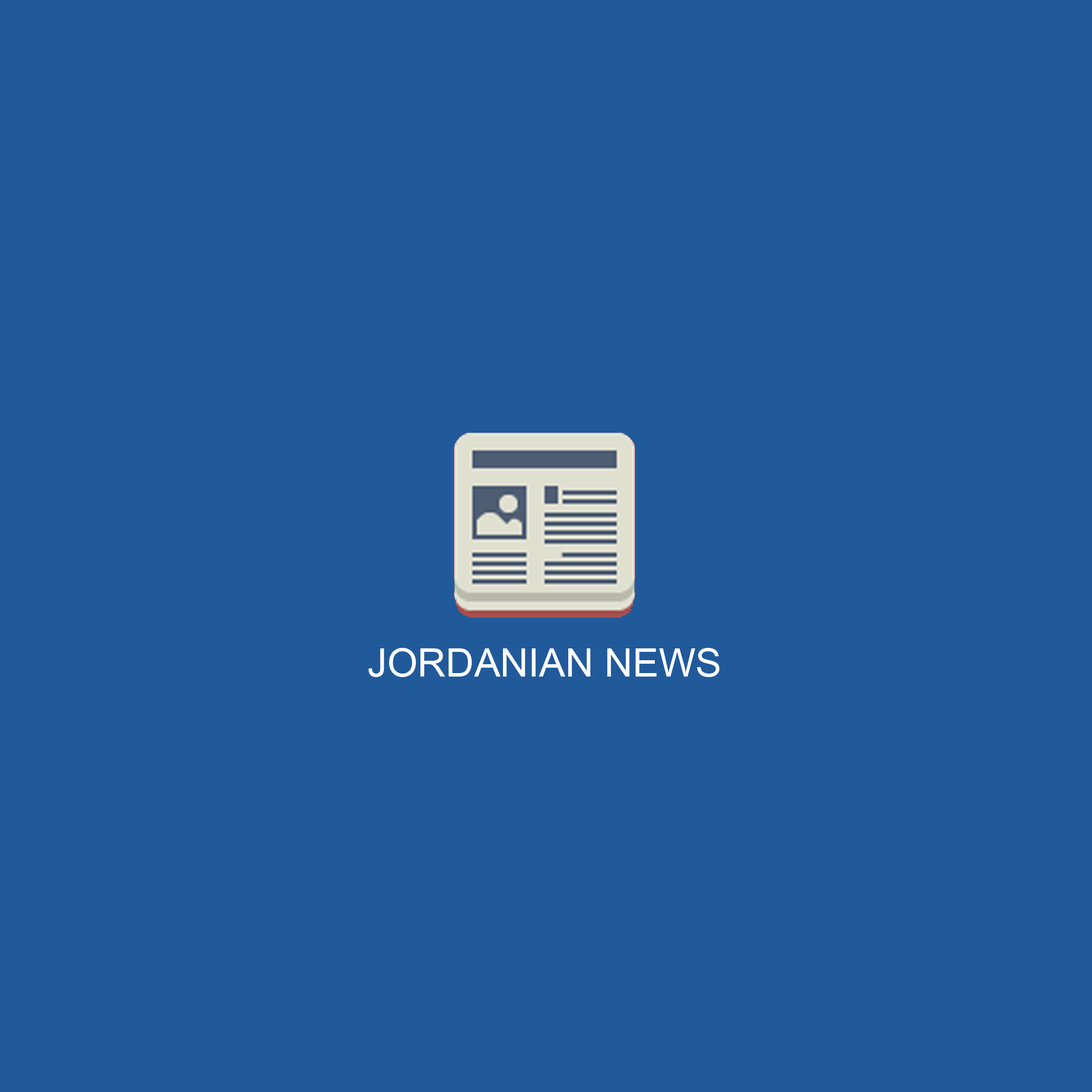
<style>
.page{position:relative;width:1092px;height:1092px;background:#215a9b}
.page>*{position:absolute;margin:0}
.t1{font:39.1px "ArialMT";color:#ffffff}
</style>
<div class="page">
<p class="t1" style="left:368px;top:648px;width:352px;height:29px">JORDANIAN NEWS</p>
</div>
